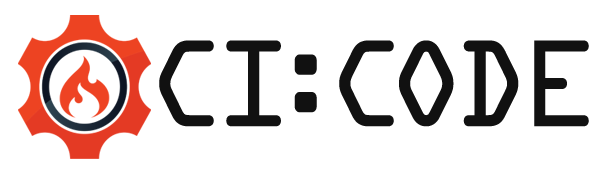
<style>
.page{position:relative;width:600px;height:169px;background:#ffffff}
.page>*{position:absolute;margin:0}
.t1{font:110.2px "OCRAStd";letter-spacing:-0.075em;color:#111111}
</style>
<div class="page">
<p class="t1" style="left:159px;top:40px;width:430px;height:87px">CI:CODE</p>
</div>
